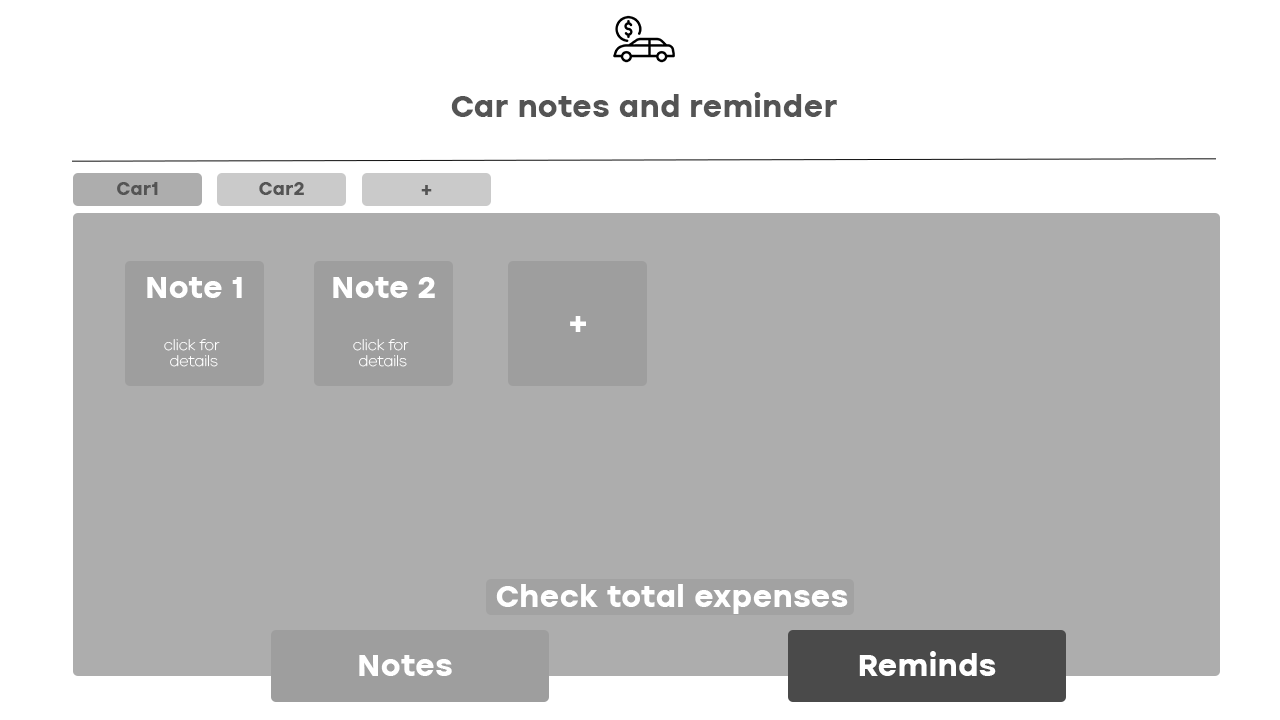
<style>
.page{position:relative;width:1280px;height:720px;background:#adadad}
.page>*{position:absolute;margin:0}
.t1{font:30px "ICTV-Bold";color:#545454}
.t2{font:18px "ICTV-Bold";color:#545454}
.t3{font:30px "ICTV-Bold";color:#ffffff}
.t4{font:14px "ICTV-Thin";color:#ffffff}
</style>
<div class="page">
<p class="t1" style="left:451px;top:92px;width:386px;height:25px">Car notes and reminder</p>
<p class="t2" style="left:117px;top:182px;width:41px;height:13px">Car1</p>
<p class="t2" style="left:259px;top:182px;width:45px;height:13px">Car2</p>
<p class="t2" style="left:421px;top:185px;width:11px;height:10px">+</p>
<p class="t3" style="left:147px;top:277px;width:95px;height:21px">Note 1</p>
<p class="t3" style="left:333px;top:277px;width:102px;height:21px">Note 2</p>
<p class="t3" style="left:570px;top:316px;width:16px;height:16px">+</p>
<p class="t4" style="left:164px;top:339px;width:56px;height:28px;text-align:center">click for<br> details</p>
<p class="t4" style="left:353px;top:339px;width:56px;height:28px;text-align:center">click for<br> details</p>
<p class="t3" style="left:496px;top:584px;width:352px;height:30px">Check total expenses</p>
<p class="t3" style="left:859px;top:651px;width:137px;height:25px">Reminds</p>
<p class="t3" style="left:359px;top:655px;width:93px;height:21px">Notes</p>
</div>
